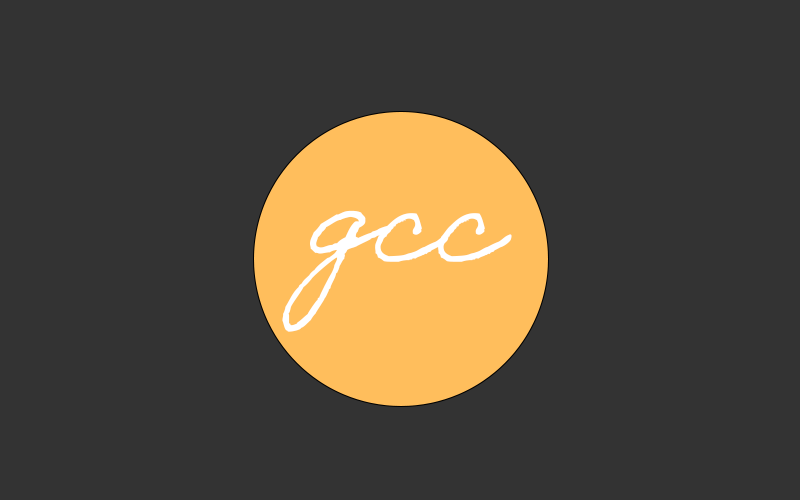
<style>
.page{position:relative;width:800px;height:500px;background:#333333}
.page>*{position:absolute;margin:0}
.t1{font:125px "AdobeHandwriting-Ernie";color:#ffffff}
</style>
<div class="page">
<p class="t1" style="left:282px;top:210px;width:230px;height:122px">gcc</p>
</div>
